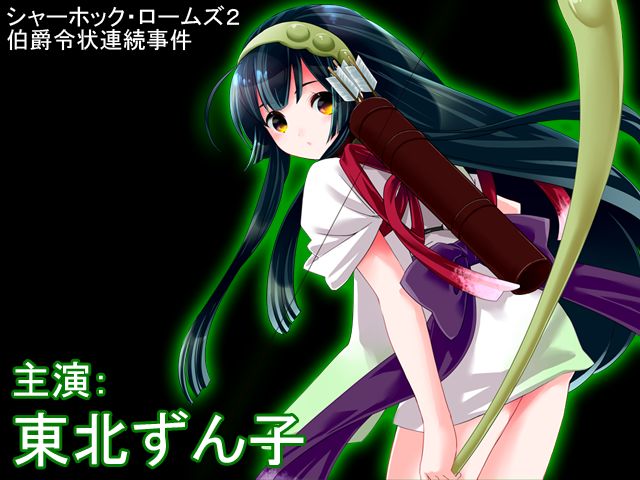
<style>
.page{position:relative;width:640px;height:480px;background:#000000}
.page>*{position:absolute;margin:0}
.t1{font:23.3px/23.3px "MS-PGothic";color:#ffffff}
.t2{font:60px/66.7px "MS-PGothic";color:#ffffff}
.t3{font:40px/50px "MS-PGothic";color:#ffffff}
</style>
<div class="page">
<p class="t1" style="left:7px;top:5px;width:233px;height:46px">シャーホック・ロームズ２<br>伯爵令状連続事件</p>
<p class="t2" style="left:14px;top:361px;width:290px;height:106px"><span class="t3">主演：<br></span>東北ずん子</p>
</div>
